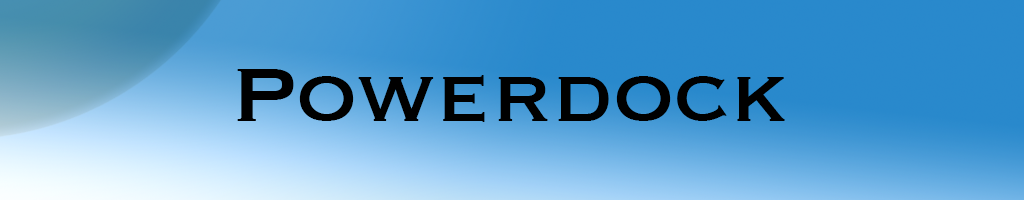
<style>
.page{position:relative;width:1024px;height:200px}
.page>*{position:absolute;margin:0}
.t1{font:100px "Copperplate";color:#000000}
</style>
<div class="page">
<p class="t1" style="left:237px;top:69px;width:548px;height:53px">Powerdock</p>
</div>
